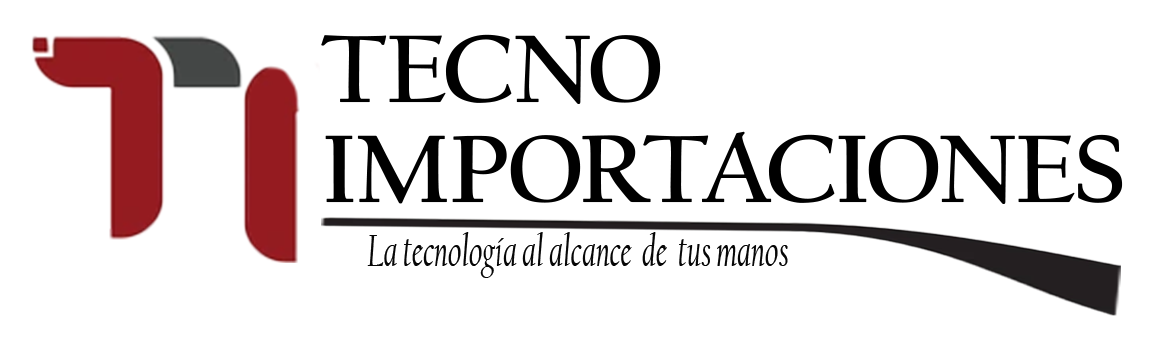
<style>
.page{position:relative;width:1154px;height:341px;background:#ffffff}
.page>*{position:absolute;margin:0}
.t1{font:100px/100px "CalifornianFB-Bold";letter-spacing:-0.005em;color:#000000}
.t2{font:45.8px "CalifornianFB-Italic";letter-spacing:0.005em;color:#060606;scale:0.69 1}
</style>
<div class="page">
<p class="t1" style="left:321px;top:34px;width:802px;height:170px">TECNO <br>IMPORTACIONES</p>
<p class="t2" style="left:367px;top:232px;width:421px;height:46px">La tecnología al alcance  de  tus manos</p>
</div>
